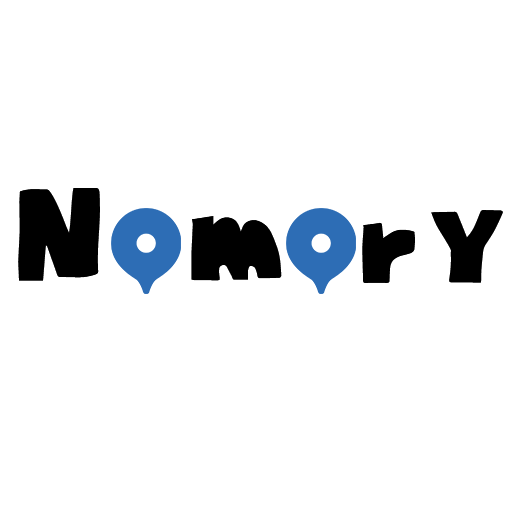
<style>
.page{position:relative;width:516px;height:516px;background:#ffffff}
.page>*{position:absolute;margin:0}
.t1{font:120px "EF_jejudoldam";letter-spacing:-0.025em;color:#000000}
</style>
<div class="page">
<p class="t1" style="left:18px;top:188px;width:485px;height:95px">N  m  ry</p>
</div>
